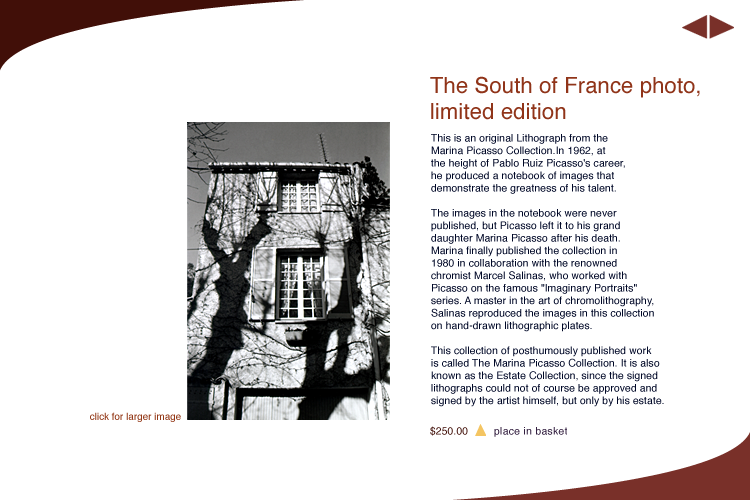
<style>
.page{position:relative;width:750px;height:500px;background:#ffffff}
.page>*{position:absolute;margin:0}
.t1{font:22px "Helvetica";letter-spacing:0.007em;color:#903419}
.t2{font:10.4px/12.5px "Helvetica";letter-spacing:0.007em;color:#000827}
.t3{font:9.9px "Helvetica";color:#933817}
.t4{font:10.4px "Helvetica";letter-spacing:0.007em;color:#410f08}
.t5{font:10.4px "Helvetica";letter-spacing:0.028em;color:#321e3f}
</style>
<div class="page">
<p class="t1" style="left:430px;top:76px;width:270px;height:44px">The South of France photo,<br>limited edition</p>
<p class="t2" style="left:431px;top:134px;width:233px;height:273px">This is an original Lithograph from the<br>Marina Picasso Collection.In 1962, at <br>the height of Pablo Ruiz Picasso's career, <br>he produced a notebook of images that <br>demonstrate the greatness of his talent. <br><br>The images in the notebook were never <br>published, but Picasso left it to his grand<br>daughter Marina Picasso after his death. <br>Marina finally published the collection in <br>1980 in collaboration with the renowned <br>chromist Marcel Salinas, who worked with <br>Picasso on the famous "Imaginary Portraits" <br>series. A master in the art of chromolithography, <br>Salinas reproduced the images in this collection <br>on hand-drawn lithographic plates. <br><br>This collection of posthumously published work ഃis called The Marina Picasso Collection. It is also ഃknown as the Estate Collection, since the signed <br>lithographs could not of course be approved and <br>signed by the artist himself, but only by his estate.</p>
<p class="t3" style="left:90px;top:412px;width:91px;height:10px">click for larger image</p>
<p class="t4" style="left:430px;top:426px;width:38px;height:10px">$250.00</p>
<p class="t5" style="left:494px;top:427px;width:73px;height:10px">place in basket</p>
</div>
